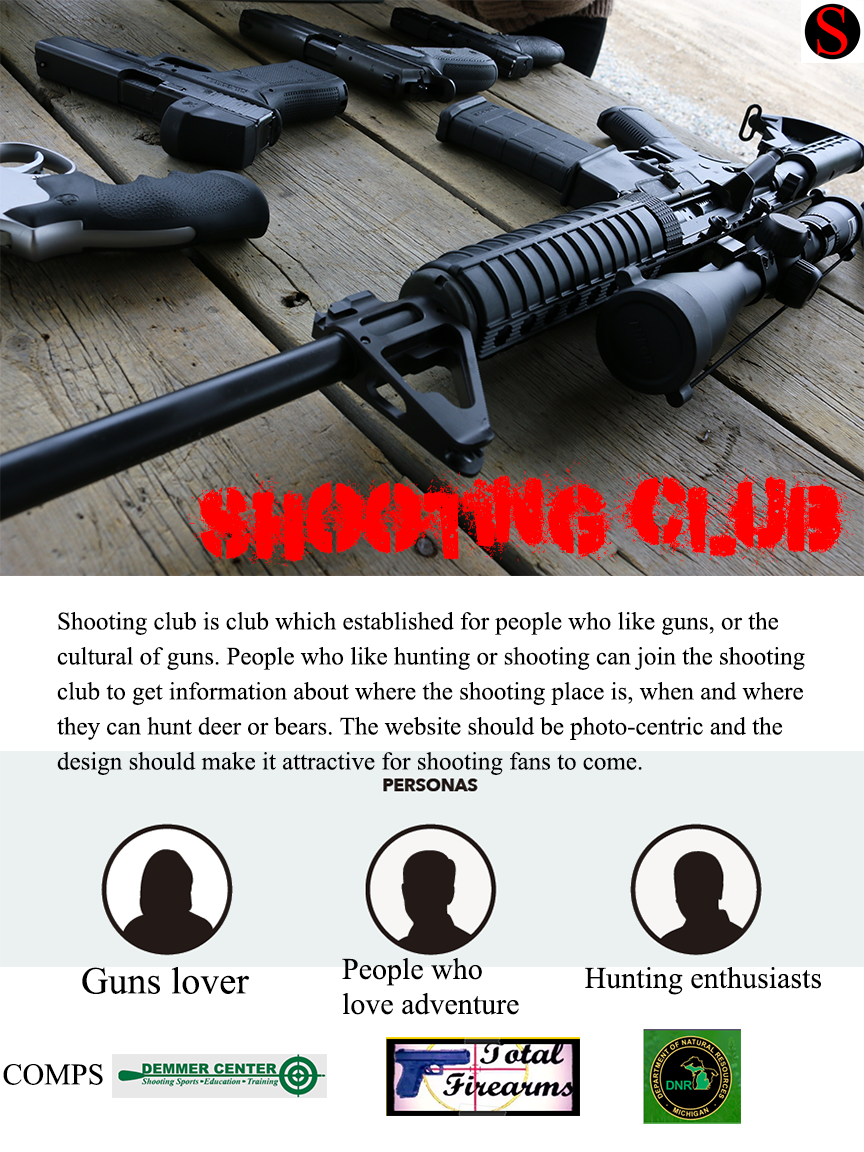
<style>
.page{position:relative;width:864px;height:1152px;background:#ffffff}
.page>*{position:absolute;margin:0}
.t1{font:99px "Misdemeanor";color:#ff0000;scale:0.9 1}
.t2{font:25px/35px "TimesNewRomanPSMT";color:#000000}
.t3{font:30px/35px "TimesNewRomanPSMT";color:#000000}
.t4{font:38px "TimesNewRomanPSMT";color:#000000}
.t5{font:30px "TimesNewRomanPSMT";color:#000000}
</style>
<div class="page">
<p class="t1" style="left:186px;top:460px;width:669px;height:111px">Shooting Club</p>
<p class="t2" style="left:57px;top:612px;width:748px;height:163px">Shooting club is club which established for people who like guns, or the cultural of guns. People who like hunting or shooting can join the shooting club to get information about where the shooting place is, when and where they can hunt deer or bears. The website should be photo-centric and the design should make it attractive for shooting fans to come.</p>
<p class="t3" style="left:342px;top:958px;width:177px;height:57px">People who love adventure</p>
<p class="t4" style="left:82px;top:967px;width:168px;height:27px">Guns lover</p>
<p class="t5" style="left:585px;top:967px;width:236px;height:28px">Hunting enthusiasts</p>
<p class="t5" style="left:3px;top:1064px;width:100px;height:21px">COMPS</p>
</div>
